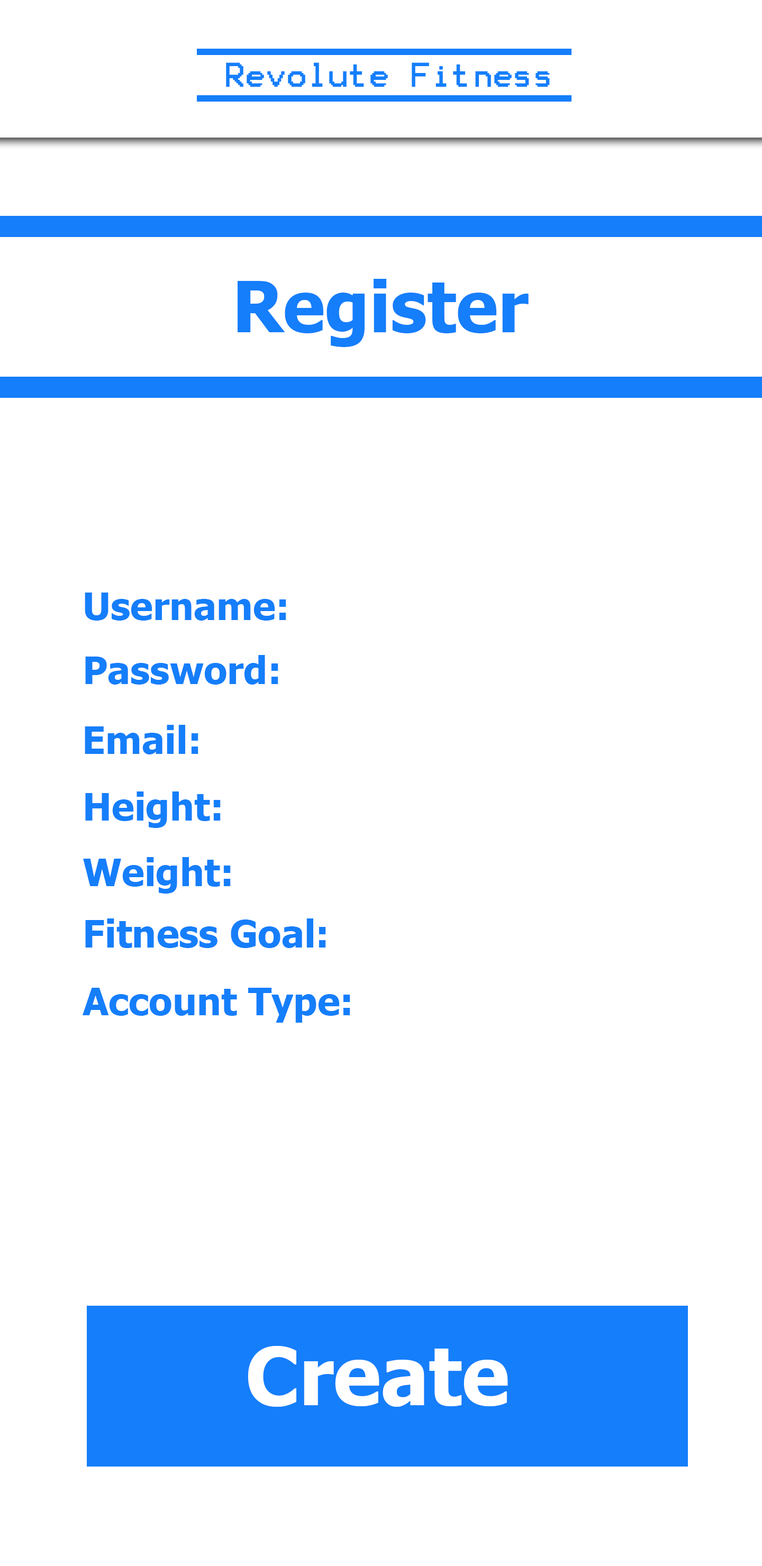
<style>
.page{position:relative;width:762px;height:1566px;background:#ffffff}
.page>*{position:absolute;margin:0}
.t1{font:27.5px "Terminal";color:#157efb}
.t2{font:70.3px "Tahoma-Bold";color:#157efb}
.t3{font:38.1px "Tahoma-Bold";color:#157efb}
.t4{font:79.9px "Tahoma-Bold";color:#ffffff}
</style>
<div class="page">
<p class="t1" style="left:226px;top:62px;width:324px;height:25px">Revolute Fitness</p>
<p class="t2" style="left:237px;top:279px;width:291px;height:68px">Register</p>
<p class="t3" style="left:85px;top:592px;width:201px;height:28px">Username:</p>
<p class="t3" style="left:85px;top:655px;width:193px;height:29px">Password:</p>
<p class="t3" style="left:85px;top:725px;width:113px;height:29px">Email:</p>
<p class="t3" style="left:85px;top:791px;width:136px;height:37px">Height:</p>
<p class="t3" style="left:83px;top:857px;width:148px;height:36px">Weight:</p>
<p class="t3" style="left:85px;top:918px;width:241px;height:30px">Fitness Goal:</p>
<p class="t3" style="left:83px;top:987px;width:267px;height:35px">Account Type:</p>
<p class="t4" style="left:248px;top:1346px;width:260px;height:60px">Create</p>
</div>
